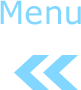
<style>
.page{position:relative;width:81px;height:90px;background:#ffffff}
.page>*{position:absolute;margin:0}
.t1{font:32px "Verdana";color:#81d7ff}
</style>
<div class="page">
<p class="t1" style="left:0px;top:0px;width:81px;height:25px">Menu</p>
</div>
